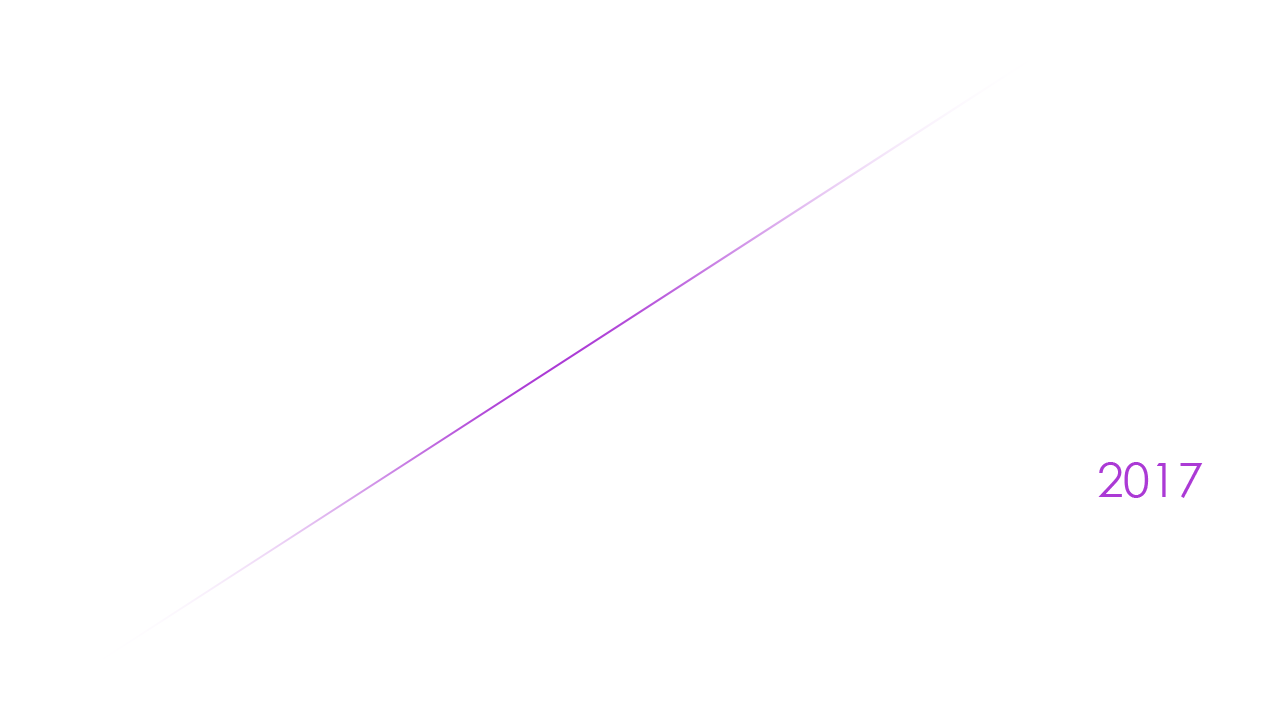
<style>
.page{position:relative;width:1280px;height:720px;background:#ffffff}
.page>*{position:absolute;margin:0}
.t1{font:48.4px "CenturyGothic";color:#ab3ad5}
</style>
<div class="page">
<p class="t1" style="left:1098px;top:462px;width:105px;height:36px">2017</p>
</div>
